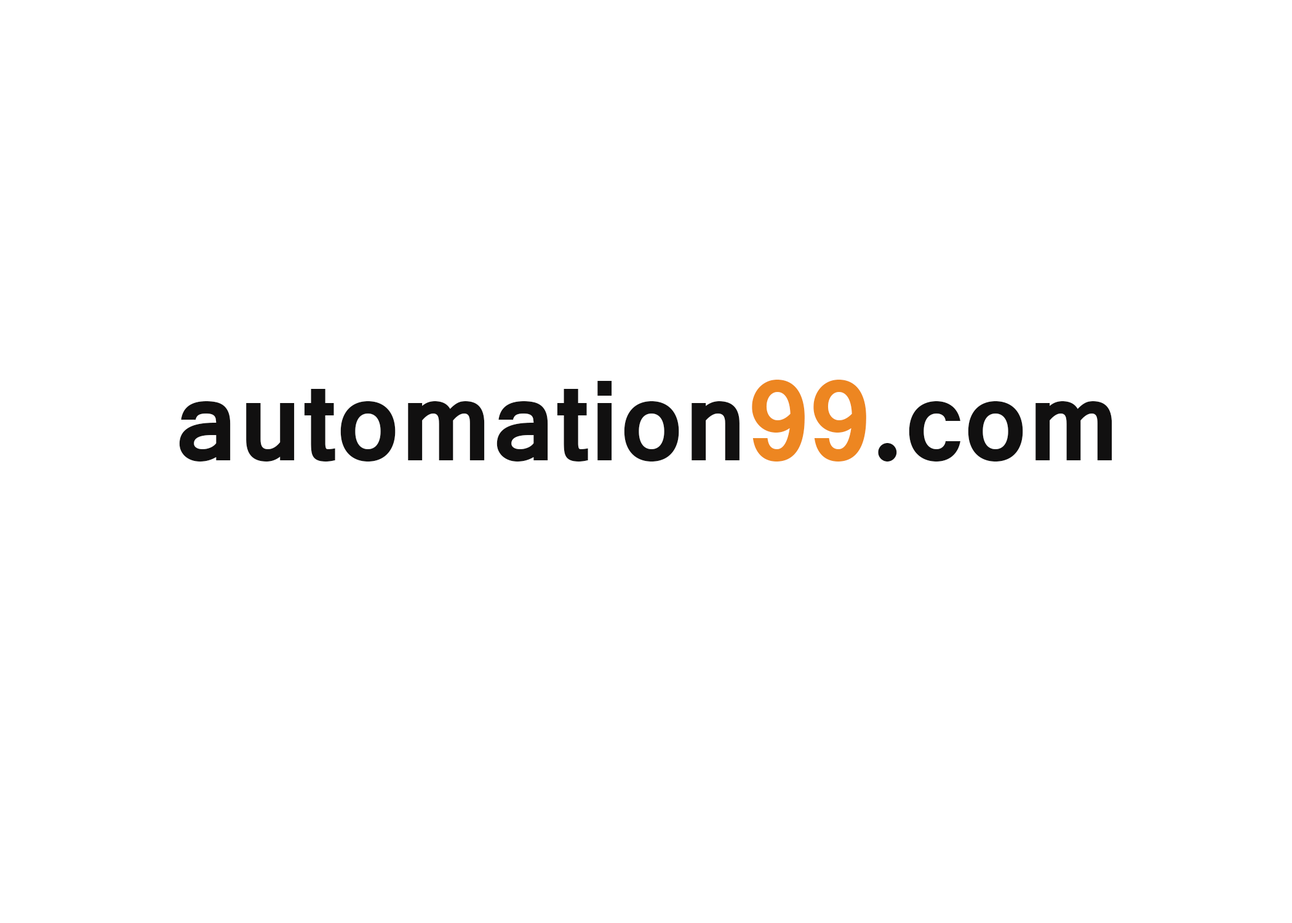
<style>
.page{position:relative;width:1292px;height:923px;background:#ffffff}
.page>*{position:absolute;margin:0}
.t1{font:123.1px "Vrinda-Bold";color:#111010}
.t2{font:123.1px "Vrinda-Bold";color:#ed8621}
</style>
<div class="page">
<p class="t1" style="left:179px;top:380px;width:933px;height:81px">automation<span class="t2">99</span>.com</p>
</div>
